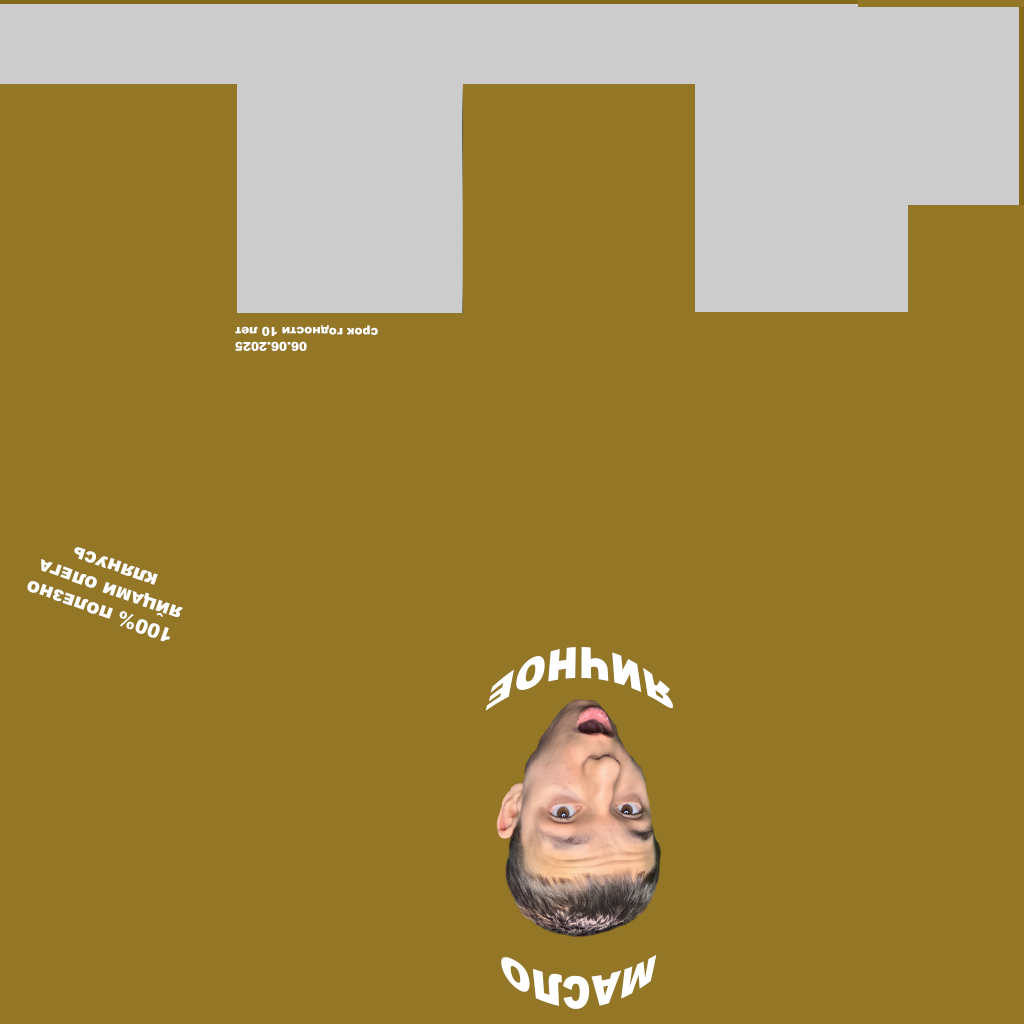
<style>
.page{position:relative;width:1024px;height:1024px;background:#937626}
.page>*{position:absolute;margin:0}
.t1{font:12.4px "Arial-Black";color:#ffffff;font-variant:small-caps;scale:0.97 1}
.t2{font:19.6px "Arial-Black";color:#ffffff;font-variant:small-caps}
.t3{font:42.3px "Arial-Black";color:#ffffff;font-variant:small-caps;scale:0.97 1}
</style>
<div class="page">
<p class="t1" style="left:235px;top:325px;width:143px;height:26px;text-align:right;rotate:-180deg">06.06.2025<br>Срок годности 10 лет</p>
<p class="t2" style="left:27px;top:547px;width:156px;height:95px;text-align:center;rotate:-161deg">100% ПОЛЕЗНО<br>ЯЙЦАМИ ОЛЕГА <br>КЛЯНУСЬ</p>
<p class="t3" style="left:485px;top:647px;width:188px;height:362px;text-align:center;rotate:-180deg">МАСЛО<br><br><br><br><br>ЯИЧНОЕ</p>
</div>
